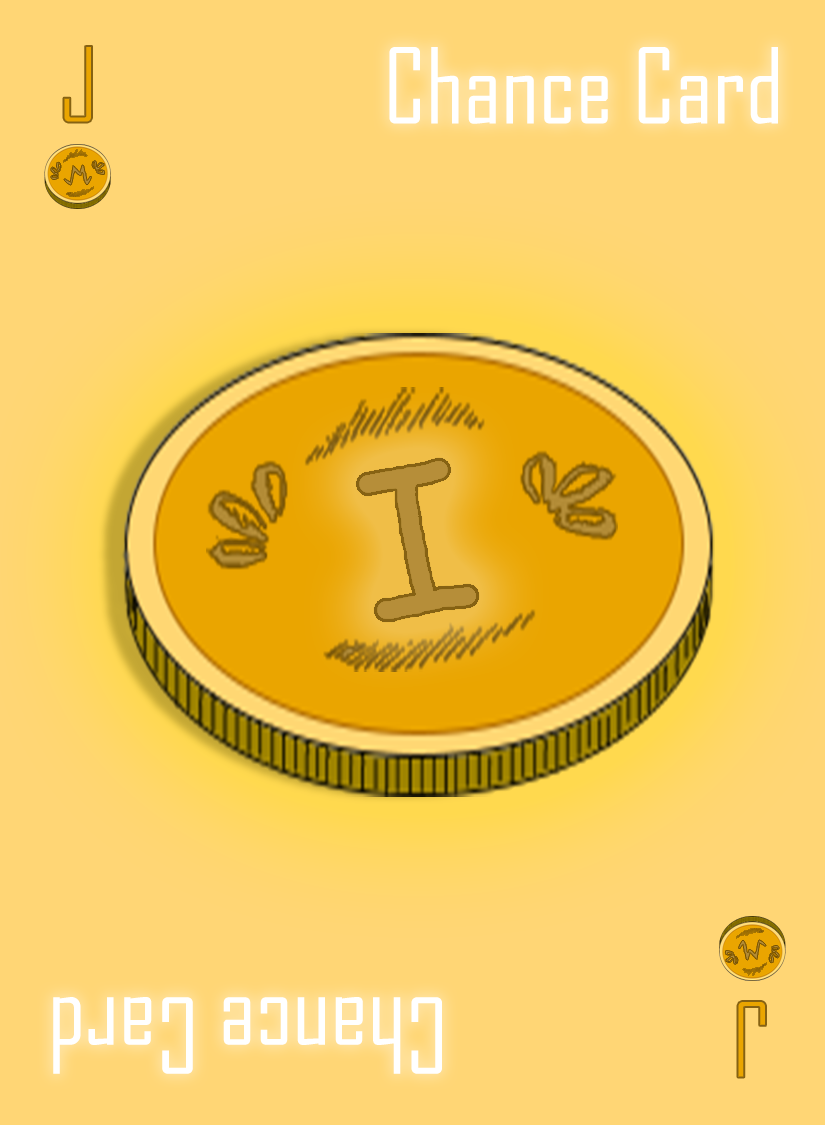
<style>
.page{position:relative;width:825px;height:1125px;background:#ffd675}
.page>*{position:absolute;margin:0}
.t1{font:100px "AgencyFB-Reg";color:#eaa500}
.t2{font:100px "AgencyFB-Reg";color:#ffffff}
</style>
<div class="page">
<p class="t1" style="left:63px;top:46px;width:29px;height:77px">J</p>
<p class="t2" style="left:389px;top:47px;width:389px;height:77px">Chance Card</p>
<p class="t2" style="left:53px;top:997px;width:389px;height:77px;rotate:180deg">Chance Card</p>
<p class="t1" style="left:737px;top:1001px;width:29px;height:77px;rotate:180deg">J</p>
</div>
